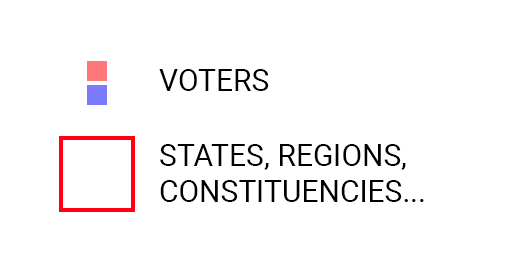
<style>
.page{position:relative;width:506px;height:253px;background:#ffffff}
.page>*{position:absolute;margin:0}
.t1{font:30px "Roboto-Regular";color:#000000}
</style>
<div class="page">
<p class="t1" style="left:159px;top:69px;width:110px;height:22px">VOTERS</p>
<p class="t1" style="left:160px;top:144px;width:264px;height:58px">STATES, REGIONS,<br>CONSTITUENCIES...</p>
</div>
